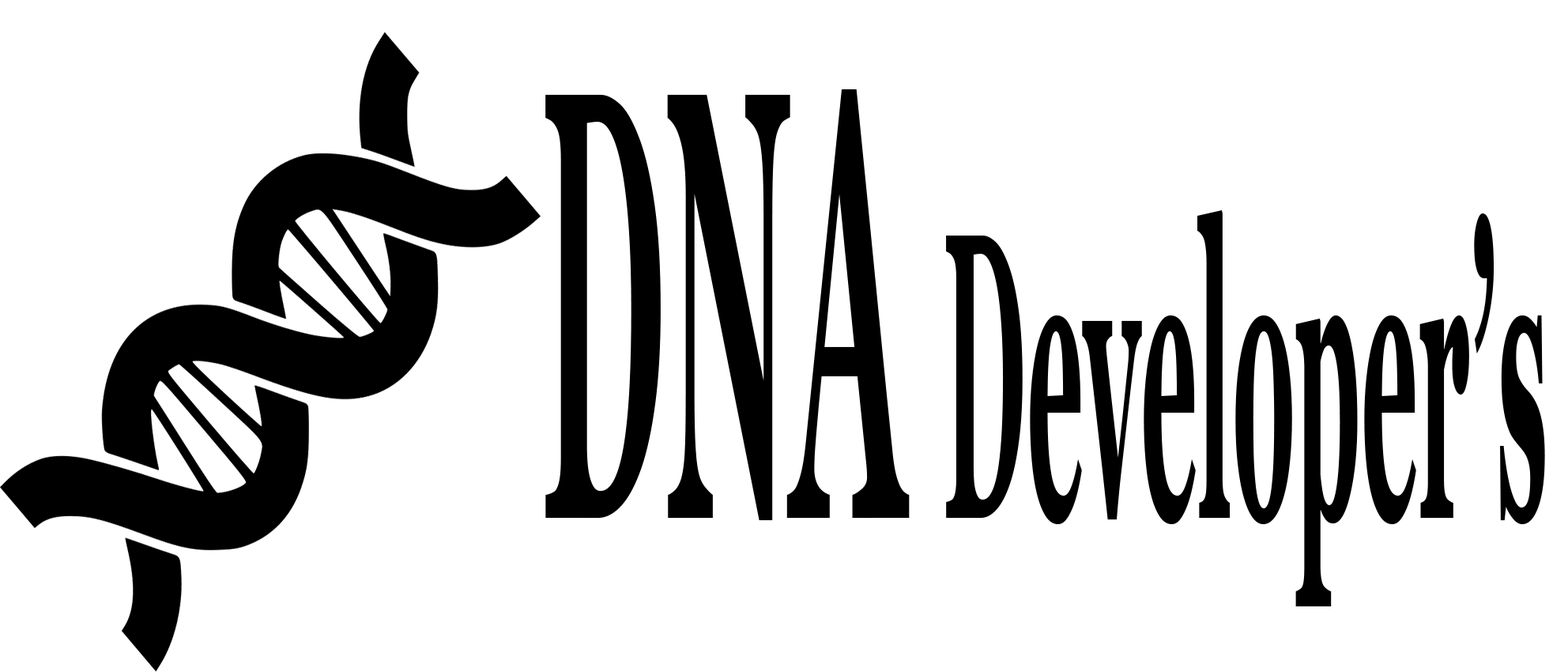
<style>
.page{position:relative;width:1568px;height:672px;background:#ffffff}
.page>*{position:absolute;margin:0}
.t1{font:407px "Georgia-Bold";color:#000000;scale:0.25 1}
.t2{font:610.4px "Georgia-Bold";color:#000000;scale:0.25 1}
</style>
<div class="page">
<p class="t1" style="left:545px;top:89px;width:1000px;height:517px"><span class="t2">DNA </span>Developer’s</p>
</div>
